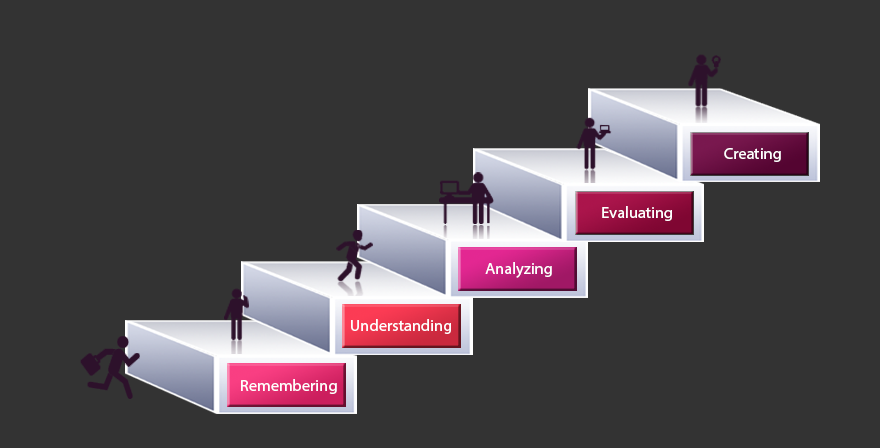
<style>
.page{position:relative;width:880px;height:448px;background:#333333}
.page>*{position:absolute;margin:0}
.t1{font:16.4px "MyriadPro-Regular";color:#ffffff}
</style>
<div class="page">
<p class="t1" style="left:724px;top:148px;width:57px;height:14px">Creating</p>
<p class="t1" style="left:602px;top:206px;width:70px;height:15px">Evaluating</p>
<p class="t1" style="left:485px;top:262px;width:67px;height:16px">Analyzing</p>
<p class="t1" style="left:351px;top:319px;width:100px;height:15px">Understanding</p>
<p class="t1" style="left:241px;top:379px;width:96px;height:15px">Remembering</p>
</div>
